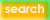
<style>
.page{position:relative;width:50px;height:20px}
.page>*{position:absolute;margin:0}
.t1{font:12px "CenturyGothic-Bold";color:#fef6f5}
</style>
<div class="page">
<p class="t1" style="left:5px;top:4px;width:39px;height:9px">search</p>
</div>
